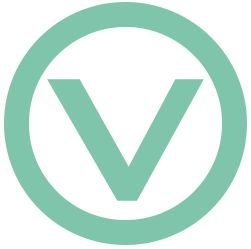
<style>
.page{position:relative;width:251px;height:249px;background:#ffffff}
.page>*{position:absolute;margin:0}
.t1{font:234.6px "BankGothicBT-Medium";color:#7fc5ab}
</style>
<div class="page">
<p class="t1" style="left:47px;top:79px;width:157px;height:122px">V</p>
</div>
